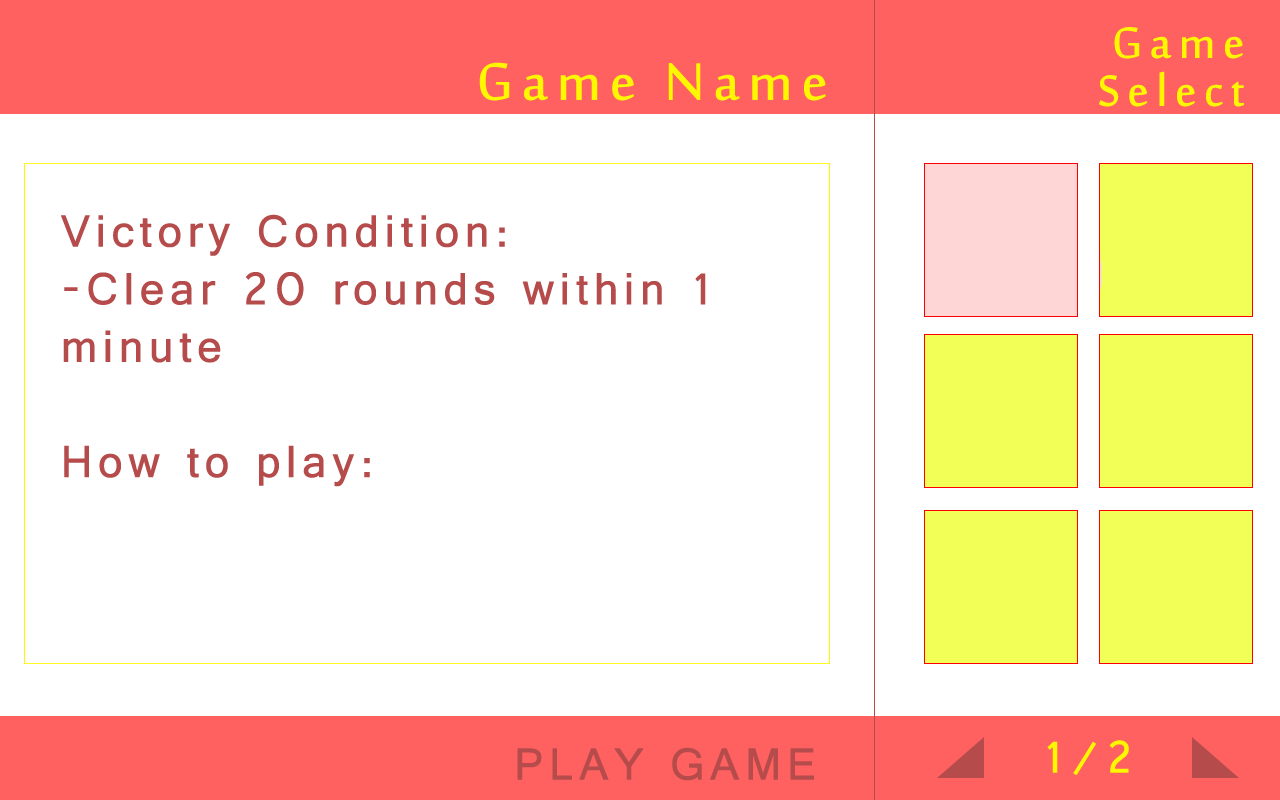
<style>
.page{position:relative;width:1280px;height:800px;background:#ffffff}
.page>*{position:absolute;margin:0}
.t1{font:60px/48px "SakkalMajalla";letter-spacing:0.1em;color:#fff700;font-weight:bold}
.t2{font:72px "SakkalMajalla";letter-spacing:0.1em;color:#fff700;font-weight:bold}
.t3{font:48px "Raavi";letter-spacing:0.1em;color:#b64b4b;font-weight:bold}
.t4{font:48px "Raavi";letter-spacing:0.1em;color:#fff700;font-weight:bold}
</style>
<div class="page">
<p class="t1" style="left:1099px;top:27px;width:145px;height:80px;text-align:right">Game<br>Select</p>
<p class="t2" style="left:479px;top:62px;width:347px;height:39px">Game Name</p>
<p class="t3" style="left:61px;top:214px;width:645px;height:273px">Victory Condition:<br>-Clear 20 rounds within 1 minute<br><br>How to play:</p>
<p class="t3" style="left:517px;top:747px;width:297px;height:34px">PLAY GAME</p>
<p class="t4" style="left:1047px;top:740px;width:82px;height:35px">1/2</p>
</div>
